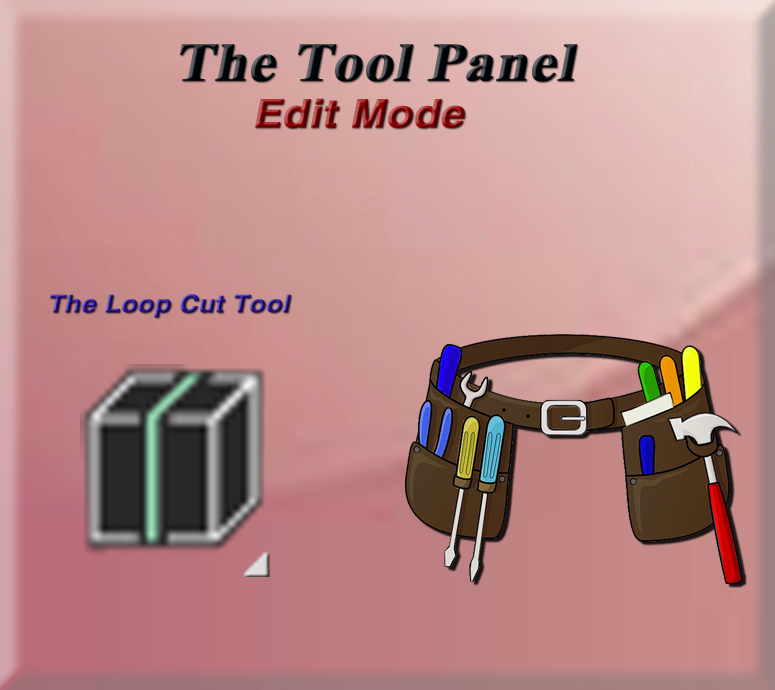
<style>
.page{position:relative;width:775px;height:690px}
.page>*{position:absolute;margin:0}
.t1{font:53.9px "TimesNewRomanPS-BoldMT";color:#000609;font-weight:bold;font-style:italic;scale:1.08 1}
.t2{font:39.1px "HelveticaLTStd-Bold";font-weight:bold;font-style:italic;scale:1.08 1}
.t3{font:53.9px "TimesNewRomanPS-BoldMT";font-weight:bold;font-style:italic;scale:1.08 1}
.t4{font:24.2px "HelveticaLTStd-Bold";font-weight:bold;font-style:italic;scale:1.08 1}
</style>
<div class="page">
<p class="t1" style="left:180px;top:44px;width:397px;height:38px">The Tool Panel</p>
<p class="t2" style="left:255px;top:98px;width:210px;height:30px"><span class="t3"> </span>Edit Mode</p>
<p class="t4" style="left:50px;top:294px;width:241px;height:24px">The Loop Cut Tool</p>
</div>
